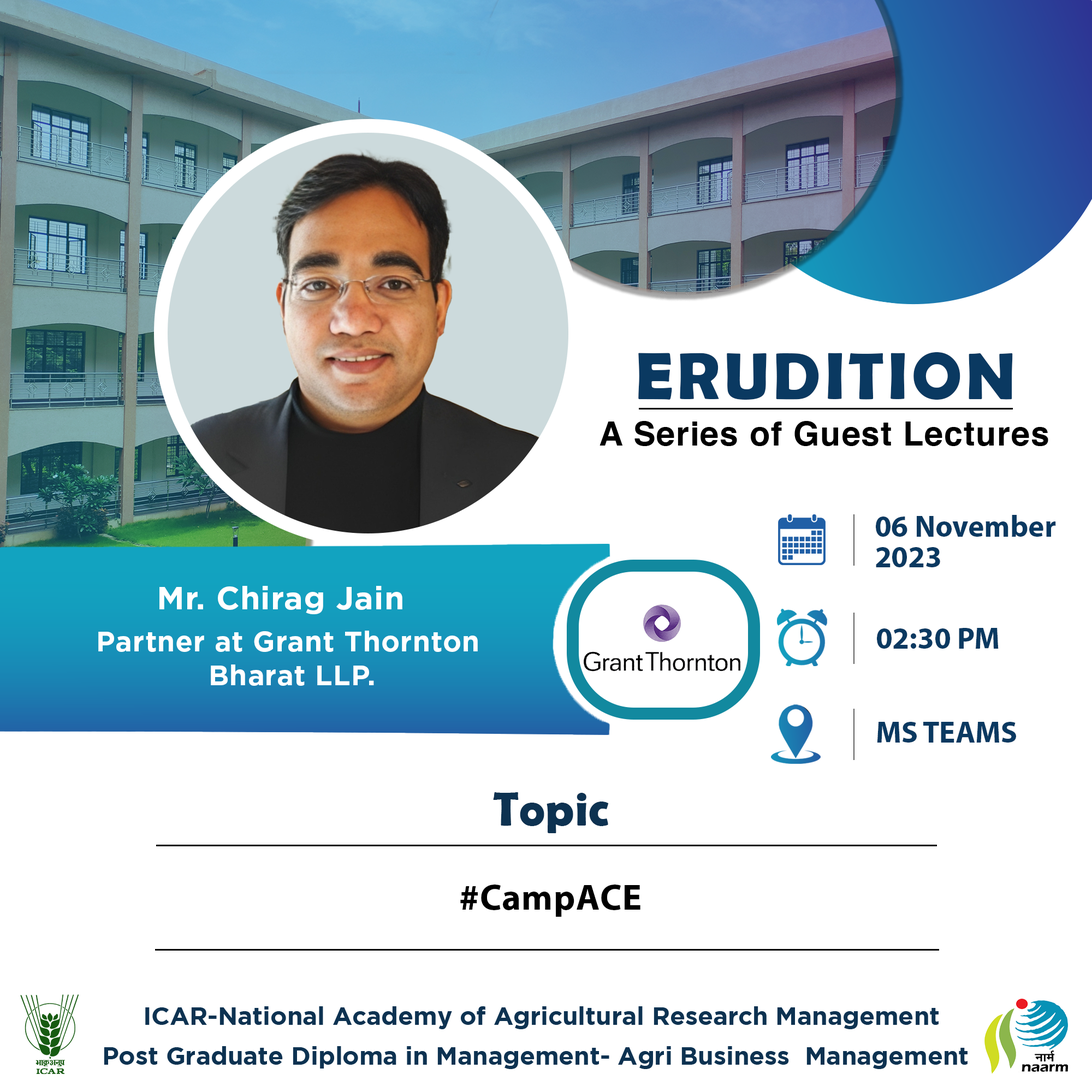
<style>
.page{position:relative;width:1092px;height:1092px;background:#ffffff}
.page>*{position:absolute;margin:0}
.t1{font:66.7px "BerlinSansFBDemi-Bold";letter-spacing:0.06em;color:#0a3961}
.t2{font:33.4px "Helvetica-Bold";letter-spacing:0.03em;color:#000000}
.t3{font:30.3px/30.3px "MyriadPro-Bold";color:#0a3961}
.t4{font:31.8px "HomepageBaukasten-Bold";letter-spacing:0.02em;color:#ffffff}
.t5{font:30.3px "MyriadPro-Bold";color:#0a3961}
.t6{font:28.2px "HomepageBaukasten-Bold";letter-spacing:0.02em;color:#ffffff}
.t7{font:48.6px "BerlinSansFBDemi-Bold";letter-spacing:0.01em;color:#0d3251}
.t8{font:36.4px "MyriadPro-Bold";letter-spacing:0.02em;color:#000000}
.t9{font:25.1px "Gotham-Bold";color:#0d3251}
</style>
<div class="page">
<p class="t1" style="left:638px;top:352px;width:375px;height:48px">ERUDITION</p>
<p class="t2" style="left:600px;top:421px;width:448px;height:25px">A Series of Guest Lectures</p>
<p class="t3" style="left:876px;top:515px;width:180px;height:52px">06 November <br>2023</p>
<p class="t4" style="left:159px;top:586px;width:243px;height:28px">Mr. Chirag Jain</p>
<p class="t5" style="left:877px;top:628px;width:122px;height:21px">02:30 PM</p>
<p class="t6" style="left:98px;top:631px;width:380px;height:55px;text-align:center">Partner at Grant Thornton <br>Bharat LLP.</p>
<p class="t5" style="left:877px;top:722px;width:139px;height:21px">MS TEAMS</p>
<p class="t7" style="left:493px;top:792px;width:116px;height:41px">Topic</p>
<p class="t8" style="left:460px;top:885px;width:180px;height:32px">#CampACE</p>
<p class="t9" style="left:145px;top:1006px;width:794px;height:23px">ICAR-National Academy of Agricultural Research Management</p>
<p class="t9" style="left:104px;top:1046px;width:863px;height:23px">Post Graduate Diploma in Management- Agri Business  Management</p>
</div>
